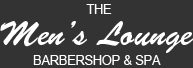
<style>
.page{position:relative;width:193px;height:68px;background:#333333}
.page>*{position:absolute;margin:0}
.t1{font:12.5px "ArialMT";color:#ffffff}
.t2{font:33.3px "BrushScriptStd";color:#ffffff}
</style>
<div class="page">
<p class="t1" style="left:86px;top:4px;width:26px;height:10px">THE</p>
<p class="t2" style="left:0px;top:21px;width:194px;height:32px">Men’s Lounge</p>
<p class="t1" style="left:33px;top:55px;width:128px;height:10px">BARBERSHOP &amp; SPA</p>
</div>
